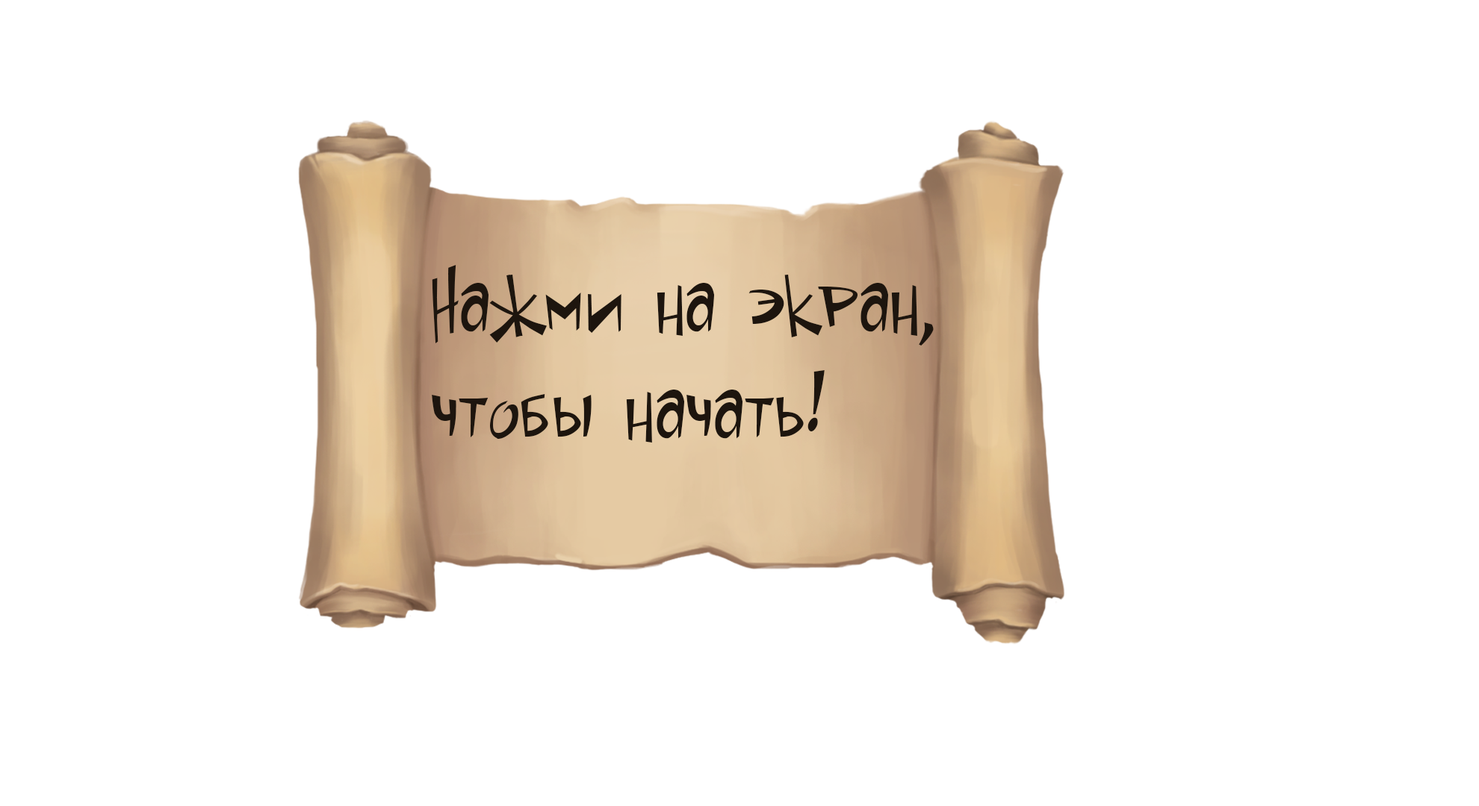
<style>
.page{position:relative;width:1479px;height:806px;background:#ffffff}
.page>*{position:absolute;margin:0}
.t1{font:10.7px "SpaceToasterCYR-Regular";color:#1d150e}
</style>
<div class="page">
<p class="t1" style="left:432px;top:265px;width:501px;height:178px;text-align:right">Нажми на экран, <br>чтобы начать!</p>
</div>
